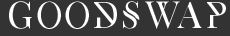
<style>
.page{position:relative;width:230px;height:36px;background:#333333}
.page>*{position:absolute;margin:0}
.t1{font:36px "Exodus-PersonalUse-Striped";color:#fefefe}
</style>
<div class="page">
<p class="t1" style="left:9px;top:1px;width:217px;height:28px">GOODSWAP</p>
</div>
